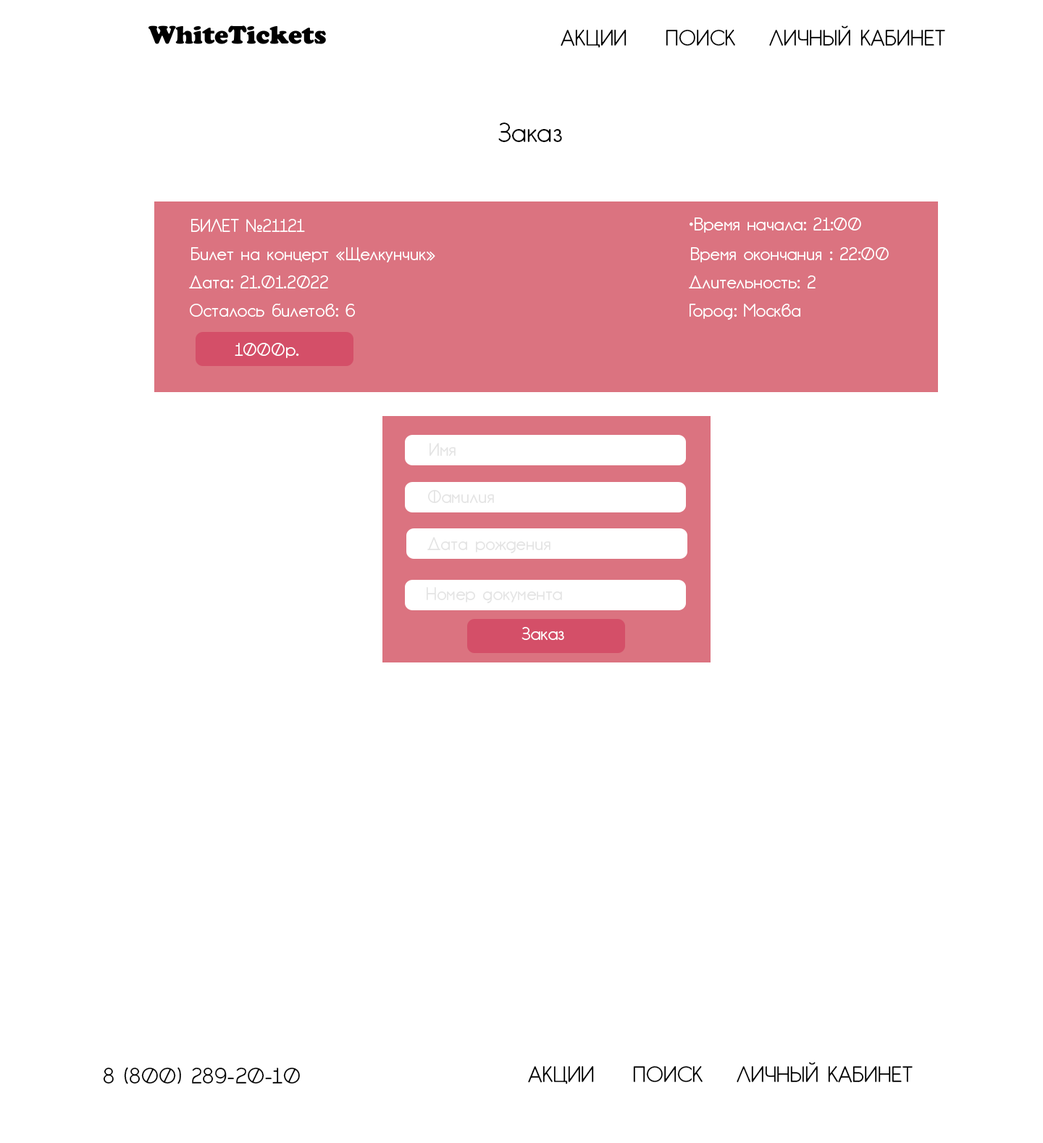
<style>
.page{position:relative;width:1043px;height:1143px;background:#ffffff}
.page>*{position:absolute;margin:0}
.t1{font:21.7px "GardensC";color:#000000}
.t2{font:26.1px "GardensC";color:#000000}
.t3{font:17.4px "GardensC";color:#ffffff}
.t4{font:17.4px "GardensC";color:#e4e4e4}
</style>
<div class="page">
<p class="t1" style="left:561px;top:25px;width:385px;height:23px">АКЦИИ  ПОИСК  ЛИЧНЫЙ КАБИНЕТ</p>
<p class="t2" style="left:499px;top:122px;width:63px;height:20px">Заказ</p>
<p class="t3" style="left:191px;top:219px;width:114px;height:13px">БИЛЕТ №21121</p>
<p class="t3" style="left:690px;top:217px;width:172px;height:16px">•Время начала: 21:00</p>
<p class="t3" style="left:191px;top:247px;width:245px;height:15px">Билет на концерт «Щелкунчик»</p>
<p class="t3" style="left:691px;top:247px;width:198px;height:15px">Время окончания : 22:00</p>
<p class="t3" style="left:189px;top:275px;width:139px;height:13px">Дата: 21.01.2022</p>
<p class="t3" style="left:689px;top:275px;width:127px;height:13px">Длительность: 2</p>
<p class="t3" style="left:190px;top:303px;width:165px;height:14px">Осталось билетов: 6</p>
<p class="t3" style="left:690px;top:304px;width:111px;height:16px">Город: Москва</p>
<p class="t3" style="left:235px;top:343px;width:64px;height:15px">1000р.</p>
<p class="t4" style="left:430px;top:443px;width:26px;height:13px">Имя</p>
<p class="t4" style="left:428px;top:490px;width:66px;height:13px">Фамилия</p>
<p class="t4" style="left:428px;top:537px;width:123px;height:17px">Дата рождения</p>
<p class="t4" style="left:427px;top:587px;width:135px;height:17px">Номер документа</p>
<p class="t3" style="left:522px;top:627px;width:42px;height:13px">Заказ</p>
<p class="t1" style="left:528px;top:1062px;width:385px;height:22px">АКЦИИ  ПОИСК  ЛИЧНЫЙ КАБИНЕТ</p>
<p class="t1" style="left:103px;top:1067px;width:197px;height:17px">8 (800) 289-20-10</p>
</div>
